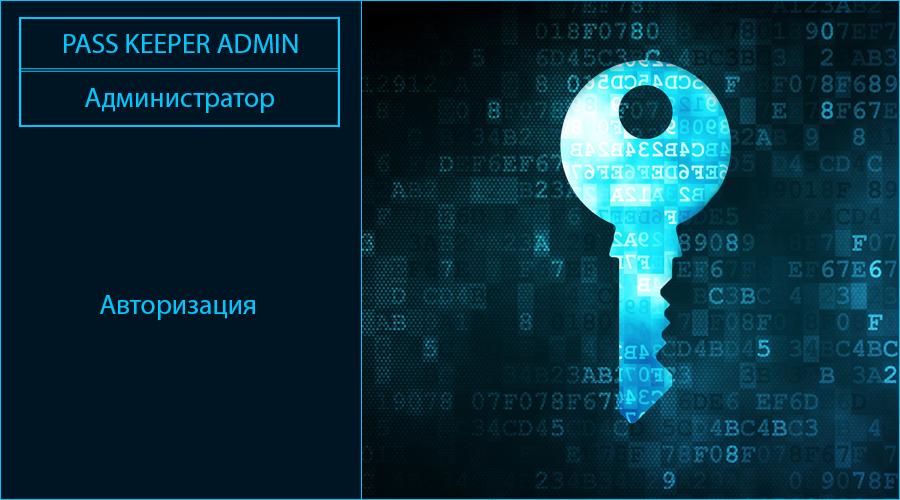
<style>
.page{position:relative;width:900px;height:500px;background:#001523}
.page>*{position:absolute;margin:0}
.t1{font:27.8px "MyriadPro-Regular";color:#00c7ff}
</style>
<div class="page">
<p class="t1" style="left:64px;top:34px;width:234px;height:19px">PASS KEEPER ADMIN</p>
<p class="t1" style="left:85px;top:88px;width:189px;height:25px">Администратор</p>
<p class="t1" style="left:100px;top:295px;width:155px;height:25px">Авторизация</p>
</div>
